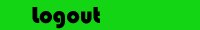
<style>
.page{position:relative;width:200px;height:30px;background:#13d513}
.page>*{position:absolute;margin:0}
.t1{font:24px "Bauhaus93";color:#000000}
</style>
<div class="page">
<p class="t1" style="left:32px;top:7px;width:68px;height:22px">Logout</p>
</div>
